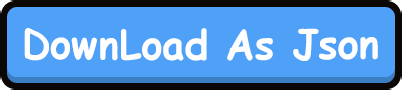
<style>
.page{position:relative;width:402px;height:90px;background:#4fa1f8}
.page>*{position:absolute;margin:0}
.t1{font:40px "ComicSansMS-Bold";color:#ffffff}
</style>
<div class="page">
<p class="t1" style="left:24px;top:28px;width:354px;height:33px">DownLoad As Json</p>
</div>
